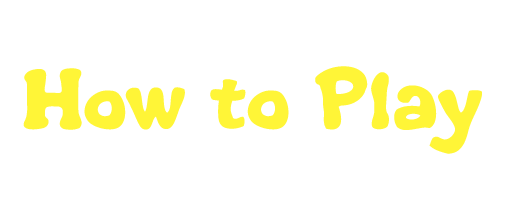
<style>
.page{position:relative;width:512px;height:215px;background:#ffffff}
.page>*{position:absolute;margin:0}
.t1{font:135.2px "Life-is-goofy";color:#fff537;scale:1.11 1}
</style>
<div class="page">
<p class="t1" style="left:23px;top:66px;width:459px;height:88px">How to Play</p>
</div>
